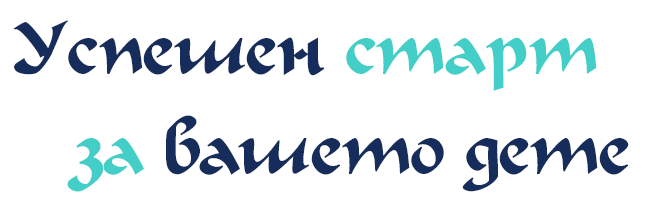
<style>
.page{position:relative;width:648px;height:210px;background:#ffffff}
.page>*{position:absolute;margin:0}
.t1{font:72px "Calligrapher";color:#162c5a}
.t2{font:72px "Calligrapher";color:#43cec7}
</style>
<div class="page">
<p class="t1" style="left:13px;top:20px;width:584px;height:71px">Успешен <span class="t2">старт</span></p>
<p class="t1" style="left:67px;top:115px;width:562px;height:77px"><span class="t2">за</span> вашето дете</p>
</div>
